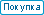
<style>
.page{position:relative;width:44px;height:15px;background:#ffffff}
.page>*{position:absolute;margin:0}
.t1{font:10px "ArialMT";letter-spacing:0.04em;color:#006699;scale:0.92 1}
</style>
<div class="page">
<p class="t1" style="left:4px;top:3px;width:36px;height:9px">Покупка</p>
</div>
